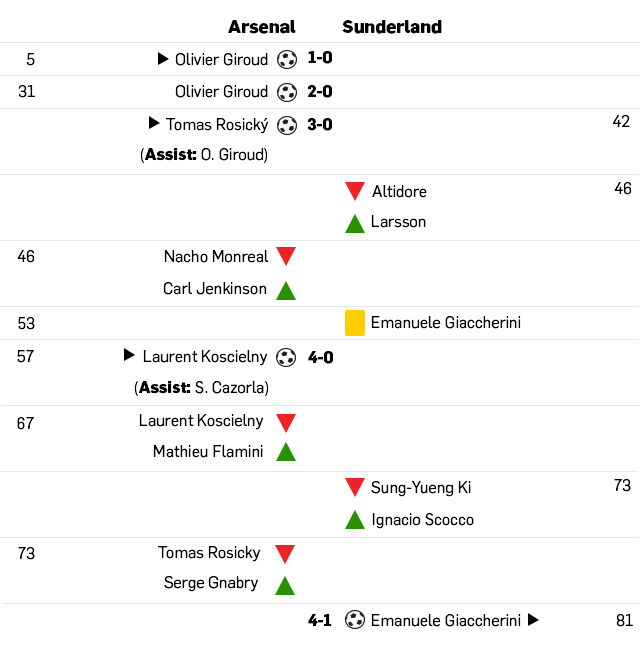
<style>
.page{position:relative;width:640px;height:667px;background:#ffffff}
.page>*{position:absolute;margin:0}
.t1{font:18px "Flama-Bold";color:#000000}
.t2{font:16px "Flama-Book";color:#000000}
.t3{font:16px "Flama-Bold";color:#000000}
</style>
<div class="page">
<p class="t1" style="left:228px;top:20px;width:68px;height:14px">Arsenal</p>
<p class="t1" style="left:342px;top:20px;width:100px;height:14px">Sunderland</p>
<p class="t2" style="left:26px;top:53px;width:9px;height:13px">5</p>
<p class="t2" style="left:175px;top:53px;width:93px;height:13px">Olivier Giroud</p>
<p class="t3" style="left:308px;top:51px;width:24px;height:13px">1-0</p>
<p class="t2" style="left:18px;top:85px;width:17px;height:13px">31</p>
<p class="t2" style="left:175px;top:85px;width:93px;height:13px">Olivier Giroud</p>
<p class="t3" style="left:307px;top:85px;width:25px;height:13px">2-0</p>
<p class="t2" style="left:166px;top:118px;width:103px;height:16px">Tomas Rosický</p>
<p class="t3" style="left:307px;top:118px;width:25px;height:13px">3-0</p>
<p class="t2" style="left:613px;top:115px;width:17px;height:12px">42</p>
<p class="t2" style="left:140px;top:148px;width:128px;height:15px">(<span class="t3">Assist: </span>O. Giroud)</p>
<p class="t2" style="left:372px;top:185px;width:55px;height:13px">Altidore</p>
<p class="t2" style="left:614px;top:182px;width:18px;height:13px">46</p>
<p class="t2" style="left:371px;top:215px;width:55px;height:13px">Larsson</p>
<p class="t2" style="left:17px;top:250px;width:18px;height:13px">46</p>
<p class="t2" style="left:164px;top:250px;width:105px;height:13px">Nacho Monreal</p>
<p class="t2" style="left:163px;top:282px;width:104px;height:13px">Carl Jenkinson</p>
<p class="t2" style="left:18px;top:317px;width:17px;height:13px">53</p>
<p class="t2" style="left:371px;top:316px;width:150px;height:13px">Emanuele Giaccherini</p>
<p class="t2" style="left:17px;top:350px;width:17px;height:13px">57</p>
<p class="t2" style="left:143px;top:350px;width:125px;height:16px">Laurent Koscielny</p>
<p class="t3" style="left:308px;top:351px;width:25px;height:13px">4-0</p>
<p class="t2" style="left:134px;top:381px;width:135px;height:15px">(<span class="t3">Assist: </span>S. Cazorla)</p>
<p class="t2" style="left:139px;top:414px;width:125px;height:16px">Laurent Koscielny</p>
<p class="t2" style="left:17px;top:417px;width:17px;height:13px">67</p>
<p class="t2" style="left:153px;top:445px;width:110px;height:13px">Mathieu Flamini</p>
<p class="t2" style="left:371px;top:481px;width:100px;height:16px">Sung-Yueng Ki</p>
<p class="t2" style="left:614px;top:479px;width:17px;height:13px">73</p>
<p class="t2" style="left:372px;top:513px;width:102px;height:16px">Ignacio Scocco</p>
<p class="t2" style="left:18px;top:547px;width:17px;height:13px">73</p>
<p class="t2" style="left:158px;top:546px;width:103px;height:16px">Tomas Rosicky</p>
<p class="t2" style="left:164px;top:576px;width:94px;height:16px">Serge Gnabry</p>
<p class="t3" style="left:308px;top:614px;width:24px;height:12px">4-1</p>
<p class="t2" style="left:371px;top:614px;width:150px;height:13px">Emanuele Giaccherini</p>
<p class="t2" style="left:616px;top:614px;width:17px;height:13px">81</p>
</div>
